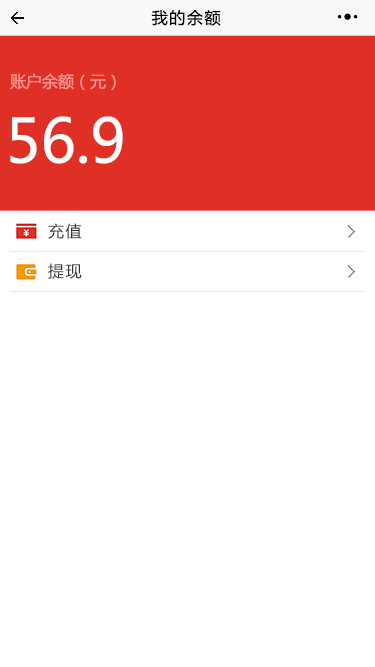
<style>
.page{position:relative;width:375px;height:667px;background:#ffffff}
.page>*{position:absolute;margin:0}
.t1{font:16px "MicrosoftYaHei";letter-spacing:0.1em;color:#020202}
.t2{font:16px "MicrosoftYaHei";color:#fc958f}
.t3{font:60px "MicrosoftYaHei";color:#ffffff}
.t4{font:16px "MicrosoftYaHei";letter-spacing:0.1em;color:#333333}
</style>
<div class="page">
<p class="t1" style="left:151px;top:10px;width:70px;height:16px">我的余额</p>
<p class="t2" style="left:10px;top:73px;width:106px;height:17px">账户余额（元）</p>
<p class="t3" style="left:10px;top:116px;width:113px;height:48px">56.9</p>
<p class="t4" style="left:48px;top:223px;width:34px;height:16px">充值</p>
<p class="t4" style="left:48px;top:263px;width:34px;height:16px">提现</p>
</div>
